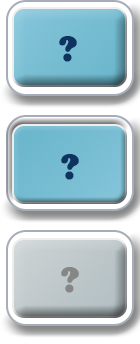
<style>
.page{position:relative;width:140px;height:344px}
.page>*{position:absolute;margin:0}
.t1{font:37.5px "CooperBlack";letter-spacing:0.05em;color:#0f3360}
.t2{font:37.5px "CooperBlack";letter-spacing:0.05em;color:#878686}
</style>
<div class="page">
<p class="t1" style="left:59px;top:36px;width:18px;height:26px">?</p>
<p class="t1" style="left:61px;top:154px;width:18px;height:26px">?</p>
<p class="t2" style="left:61px;top:267px;width:18px;height:26px">?</p>
</div>
